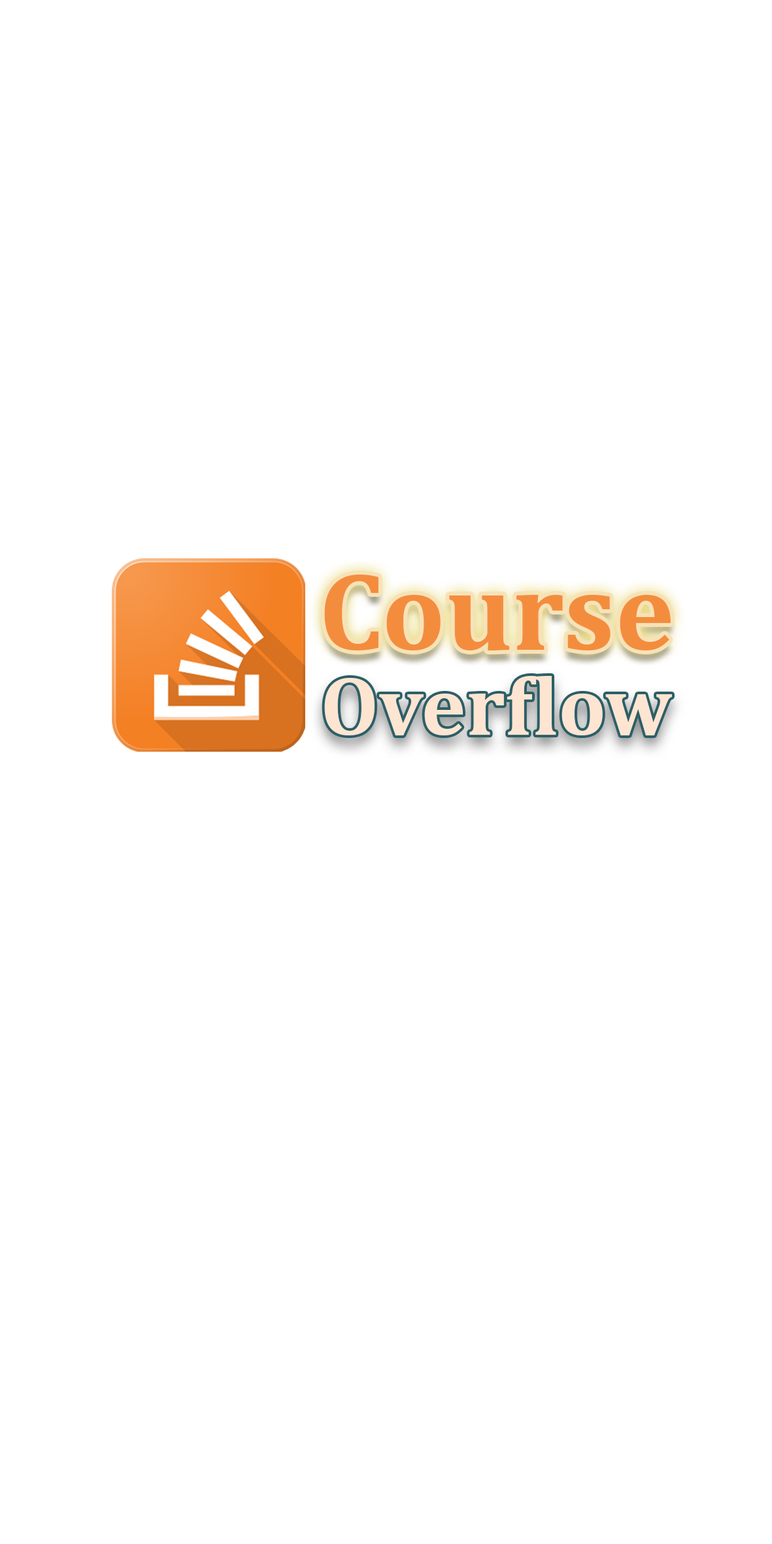
<style>
.page{position:relative;width:772px;height:1544px;background:#ffffff}
.page>*{position:absolute;margin:0}
.t1{font:111.6px "Cambria-Bold";color:#f38d3d}
.t2{font:84.5px "Cambria-Bold";color:#fde5d2}
</style>
<div class="page">
<p class="t1" style="left:324px;top:575px;width:347px;height:76px">Course</p>
<p class="t2" style="left:324px;top:676px;width:348px;height:60px">Overflow</p>
</div>
